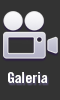
<style>
.page{position:relative;width:60px;height:100px;background:#333333}
.page>*{position:absolute;margin:0}
.t1{font:15px "TradeGothicLTStd-BdCn20";color:#ffffff;scale:1.05 1}
</style>
<div class="page">
<p class="t1" style="left:8px;top:72px;width:39px;height:11px">Galeria</p>
</div>
